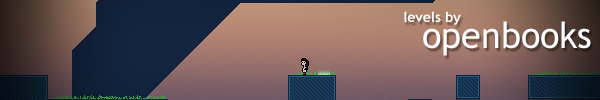
<style>
.page{position:relative;width:600px;height:100px}
.page>*{position:absolute;margin:0}
.t1{font:14px "TrebuchetMS-Bold";color:#ffffff}
.t2{font:36px "TrebuchetMS";color:#ffffff}
</style>
<div class="page">
<p class="t1" style="left:404px;top:11px;width:57px;height:14px">levels by</p>
<p class="t2" style="left:423px;top:21px;width:168px;height:35px">openbooks</p>
</div>
